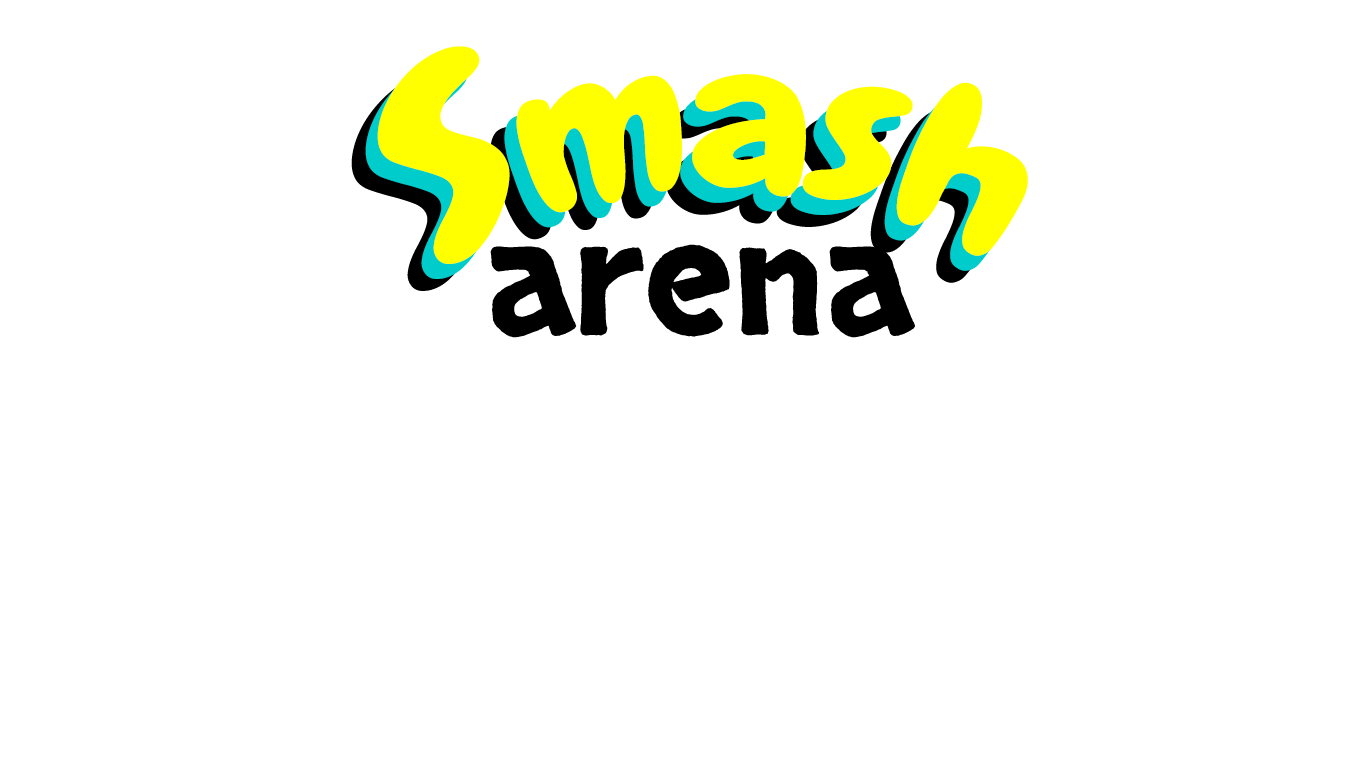
<style>
.page{position:relative;width:1366px;height:768px;background:#ffffff}
.page>*{position:absolute;margin:0}
.t1{font:200px "Chewy-Regular";color:#ffff00}
.t2{font:250px "Chewy-Regular";color:#ffff00}
.t3{font:200px "Chewy-Regular"}
.t4{font:250px "Chewy-Regular"}
.t5{font:154.9px "Skranji";color:#000000;scale:1.07 1}
</style>
<div class="page">
<p class="t1" style="left:377px;top:46px;width:651px;height:218px"><span class="t2">S</span>mash</p>
<p class="t3" style="left:351px;top:73px;width:651px;height:218px"><span class="t4">S</span>mash</p>
<p class="t5" style="left:490px;top:244px;width:425px;height:94px">arena</p>
</div>
